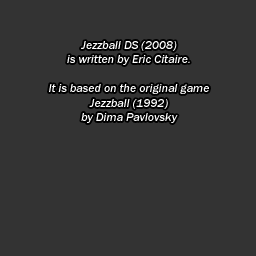
<style>
.page{position:relative;width:256px;height:256px;background:#333333}
.page>*{position:absolute;margin:0}
.t1{font:12px "FranklinGothic-MediumItalic";color:#ffffff}
</style>
<div class="page">
<p class="t1" style="left:49px;top:41px;width:160px;height:82px;text-align:center">Jezzball DS (2008)<br>is written by Eric Citaire.<br><br>It is based on the original game<br>Jezzball (1992)<br>by Dima Pavlovsky</p>
</div>
